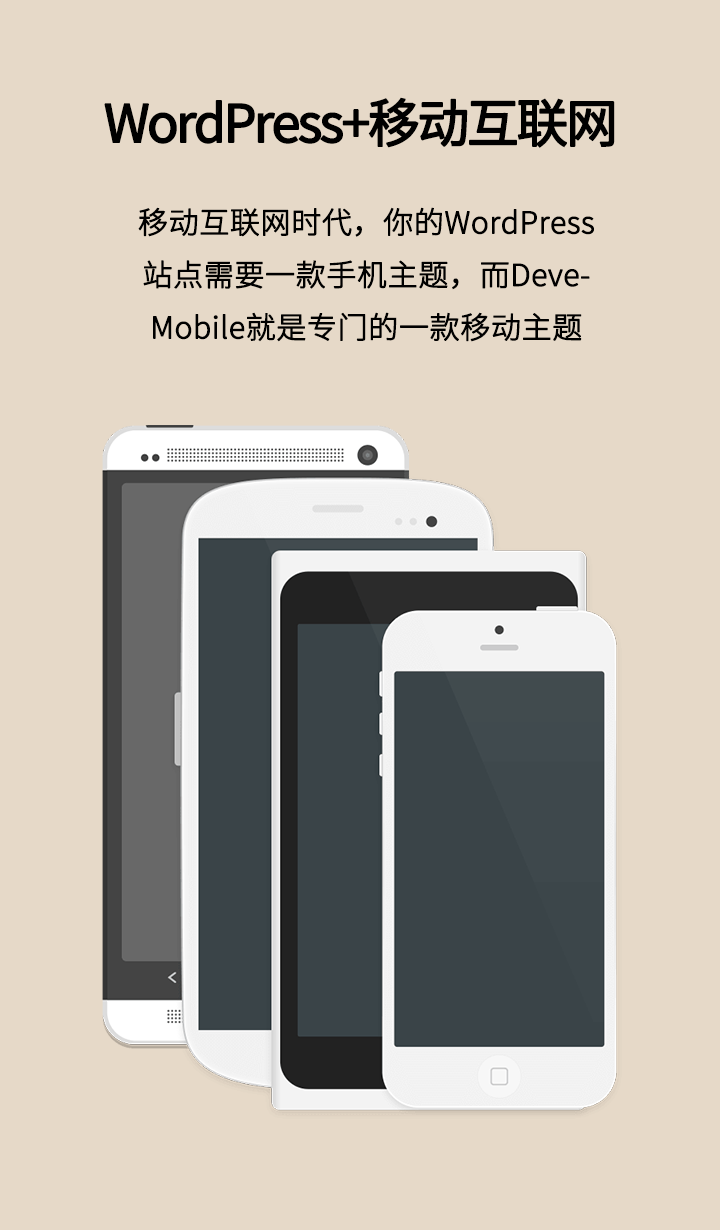
<style>
.page{position:relative;width:720px;height:1230px;background:#e6d9c8}
.page>*{position:absolute;margin:0}
.t1{font:52px "SourceHanSansCN-Regular";letter-spacing:-0.075em;color:#000000;font-weight:bold}
.t2{font:30px "SourceHanSansCN-Light";letter-spacing:-0.005em;color:#000000;font-weight:bold}
</style>
<div class="page">
<p class="t1" style="left:104px;top:97px;width:511px;height:51px">WordPress+移动互联网</p>
<p class="t2" style="left:138px;top:207px;width:456px;height:135px;text-align:center">移动互联网时代，你的WordPress 站点需要一款手机主题，而DeveMobile就是专门的一款移动主题</p>
</div>
